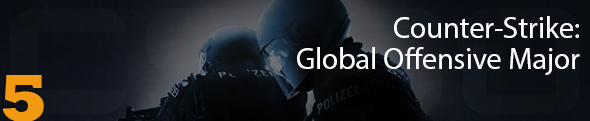
<style>
.page{position:relative;width:590px;height:121px}
.page>*{position:absolute;margin:0}
.t1{font:30px "MyriadPro-Regular";color:#ffffff}
.t2{font:70px "Rockwell-ExtraBold";color:#f09911}
</style>
<div class="page">
<p class="t1" style="left:394px;top:16px;width:185px;height:22px">Counter-Strike:</p>
<p class="t1" style="left:297px;top:47px;width:283px;height:28px">Global Offensive Major Campionships</p>
<p class="t2" style="left:2px;top:75px;width:42px;height:47px">5</p>
</div>
